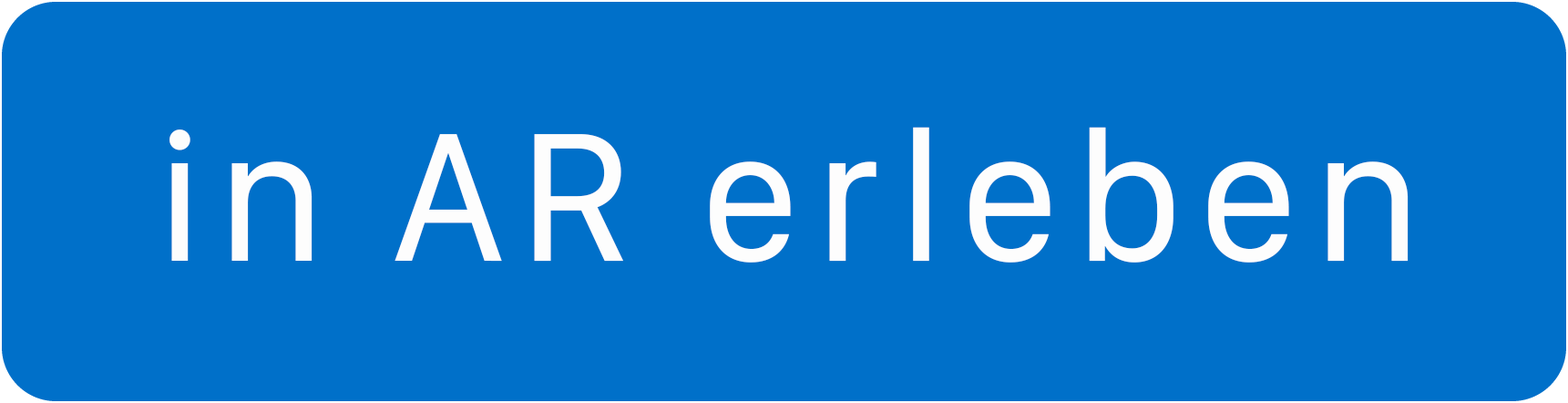
<style>
.page{position:relative;width:1568px;height:403px;background:#0070c9}
.page>*{position:absolute;margin:0}
.t1{font:189.8px "SFCompactDisplay-Regular";letter-spacing:0.08em;color:#fdfdfd}
</style>
<div class="page">
<p class="t1" style="left:169px;top:127px;width:1240px;height:135px">in AR erleben</p>
</div>
